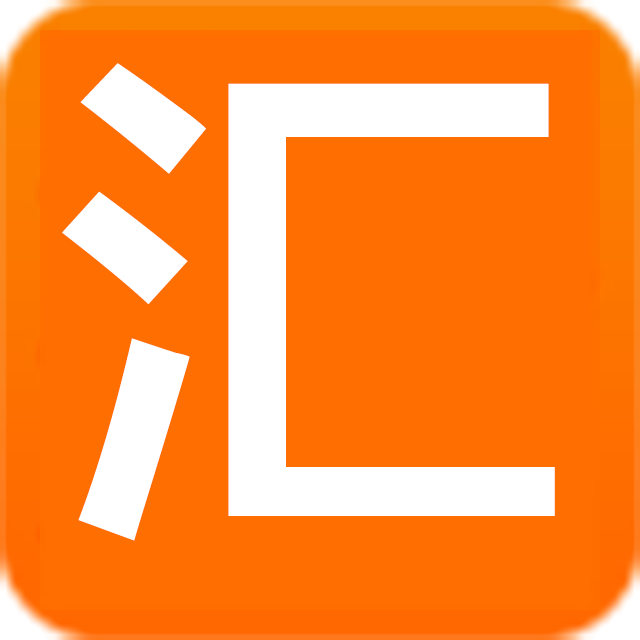
<style>
.page{position:relative;width:640px;height:640px;background:#fe6e00}
.page>*{position:absolute;margin:0}
.t1{font:521.6px "FZLTZHK--GBK1-0";color:#ffffff}
</style>
<div class="page">
<p class="t1" style="left:62px;top:63px;width:493px;height:478px">汇</p>
</div>
